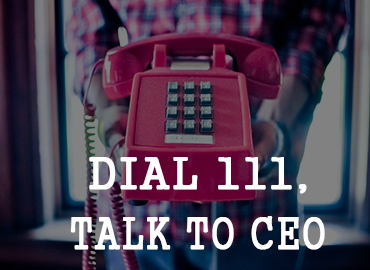
<style>
.page{position:relative;width:370px;height:270px}
.page>*{position:absolute;margin:0}
.t1{font:44.4px "Gungsuh";color:#ffffff;text-transform:uppercase;font-weight:bold}
.t2{font:44.4px "Gungsuh";color:#ffffff;text-transform:uppercase;font-weight:bold;scale:0.84 1}
</style>
<div class="page">
<p class="t1" style="left:89px;top:157px;width:218px;height:37px">dial 111,</p>
<p class="t2" style="left:70px;top:216px;width:255px;height:34px">talk to ceo</p>
</div>
